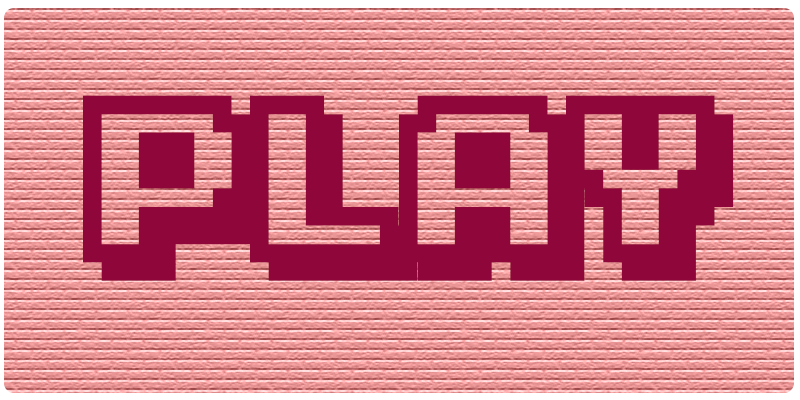
<style>
.page{position:relative;width:800px;height:400px;background:#8f063a}
.page>*{position:absolute;margin:0}
.t1{font:190px "KarmaticArcade";color:#8f063a}
</style>
<div class="page">
<p class="t1" style="left:83px;top:95px;width:651px;height:186px">Play</p>
</div>
